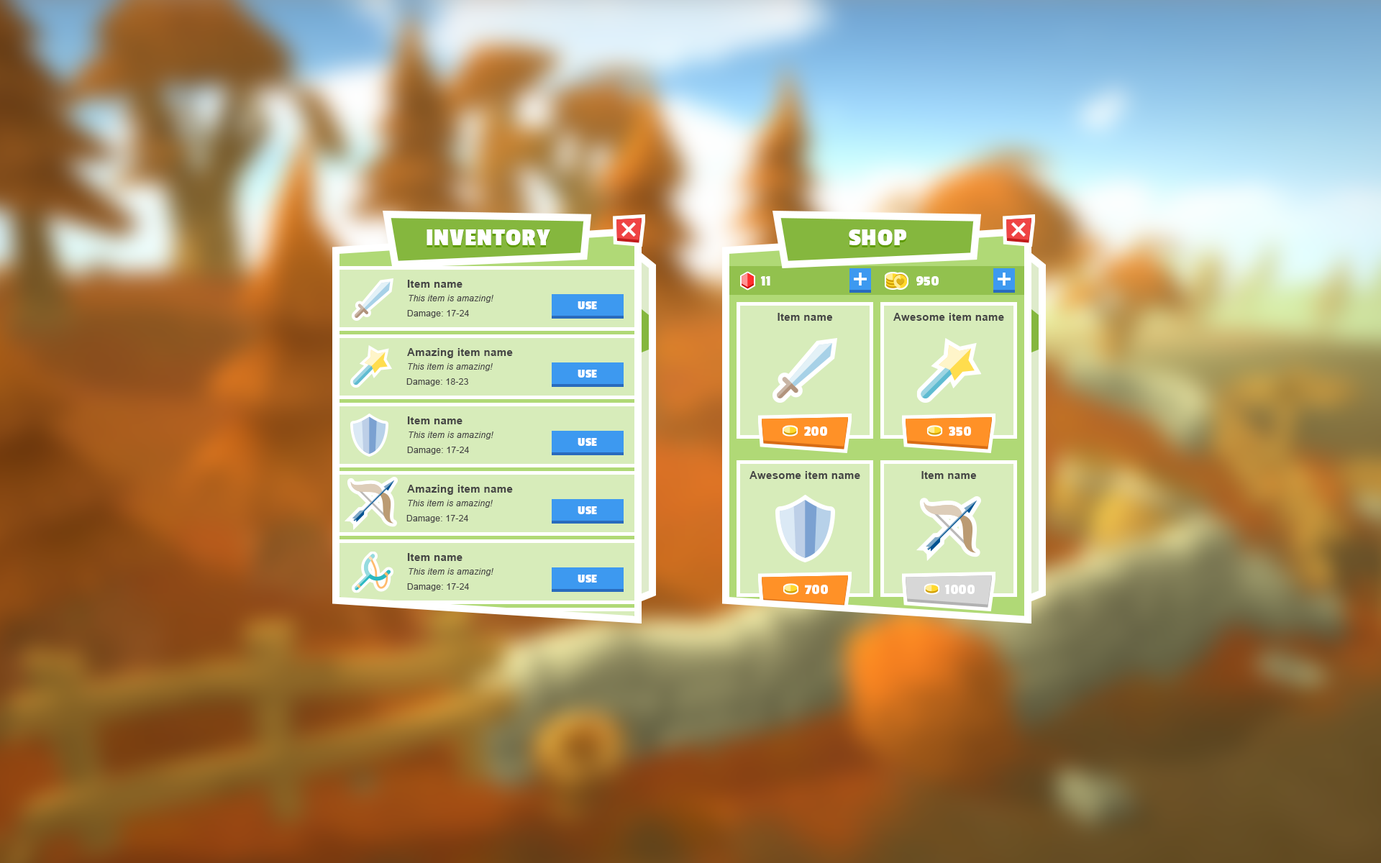
<style>
.page{position:relative;width:1381px;height:863px}
.page>*{position:absolute;margin:0}
.t1{font:25.2px "PassionOne-Bold";letter-spacing:0.025em;color:#ffffff;text-transform:uppercase}
.t2{font:10.8px "Arial-BoldMT";letter-spacing:0.025em;color:#454545}
.t3{font:14.4px "PassionOne-Bold";letter-spacing:0.025em;color:#ffffff;text-transform:uppercase}
.t4{font:8.6px "Arial-ItalicMT";letter-spacing:0.025em;color:#454545}
.t5{font:12.2px "PassionOne-Bold";letter-spacing:0.025em;color:#ffffff;text-transform:uppercase}
.t6{font:8.6px "ArialMT";letter-spacing:0.025em;color:#454545}
</style>
<div class="page">
<p class="t1" style="left:427px;top:229px;width:123px;height:16px">Inventory</p>
<p class="t1" style="left:849px;top:229px;width:57px;height:16px">Shop</p>
<p class="t2" style="left:407px;top:280px;width:56px;height:8px">Item name</p>
<p class="t3" style="left:761px;top:276px;width:9px;height:10px">11</p>
<p class="t3" style="left:917px;top:276px;width:22px;height:10px">950</p>
<p class="t4" style="left:409px;top:295px;width:85px;height:8px">This item is amazing!</p>
<p class="t5" style="left:578px;top:301px;width:19px;height:8px">Use</p>
<p class="t6" style="left:407px;top:310px;width:62px;height:8px">Damage: 17-24</p>
<p class="t2" style="left:778px;top:313px;width:55px;height:8px">Item name</p>
<p class="t2" style="left:894px;top:313px;width:110px;height:8px">Awesome item name</p>
<p class="t2" style="left:407px;top:348px;width:106px;height:10px">Amazing item name</p>
<p class="t4" style="left:408px;top:363px;width:85px;height:8px">This item is amazing!</p>
<p class="t5" style="left:578px;top:370px;width:19px;height:8px">Use</p>
<p class="t6" style="left:406px;top:378px;width:62px;height:8px">Damage: 18-23</p>
<p class="t2" style="left:407px;top:417px;width:56px;height:7px">Item name</p>
<p class="t4" style="left:409px;top:432px;width:85px;height:8px">This item is amazing!</p>
<p class="t3" style="left:804px;top:427px;width:23px;height:9px">200</p>
<p class="t3" style="left:949px;top:427px;width:22px;height:9px">350</p>
<p class="t6" style="left:407px;top:447px;width:62px;height:8px">Damage: 17-24</p>
<p class="t5" style="left:578px;top:438px;width:19px;height:8px">Use</p>
<p class="t2" style="left:750px;top:471px;width:110px;height:8px">Awesome item name</p>
<p class="t2" style="left:922px;top:471px;width:55px;height:8px">Item name</p>
<p class="t2" style="left:407px;top:485px;width:106px;height:10px">Amazing item name</p>
<p class="t4" style="left:408px;top:500px;width:85px;height:8px">This item is amazing!</p>
<p class="t5" style="left:578px;top:506px;width:19px;height:8px">Use</p>
<p class="t6" style="left:406px;top:515px;width:62px;height:8px">Damage: 17-24</p>
<p class="t2" style="left:407px;top:553px;width:56px;height:8px">Item name</p>
<p class="t4" style="left:409px;top:568px;width:85px;height:8px">This item is amazing!</p>
<p class="t5" style="left:578px;top:575px;width:19px;height:8px">Use</p>
<p class="t6" style="left:407px;top:583px;width:62px;height:8px">Damage: 17-24</p>
<p class="t3" style="left:805px;top:585px;width:23px;height:9px">700</p>
</div>
